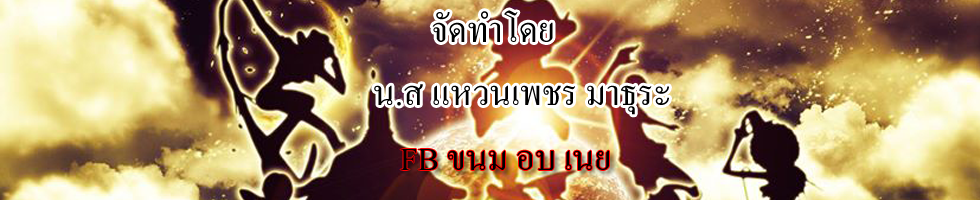
<style>
.page{position:relative;width:980px;height:200px}
.page>*{position:absolute;margin:0}
.t1{font:48px "AngsanaNew";color:#000000}
</style>
<div class="page">
<p class="t1" style="left:432px;top:10px;width:121px;height:32px">จัดทำโดย</p>
<p class="t1" style="left:374px;top:84px;width:295px;height:31px">น.ส แหวนเพชร มาธุระ</p>
<p class="t1" style="left:400px;top:149px;width:209px;height:21px">FB ขนม อบ เนย</p>
</div>
